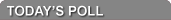
<style>
.page{position:relative;width:171px;height:20px;background:#858585}
.page>*{position:absolute;margin:0}
.t1{font:13.3px "Arial-BoldMT";color:#ffffff}
</style>
<div class="page">
<p class="t1" style="left:7px;top:5px;width:96px;height:11px">TODAY’S POLL</p>
</div>
